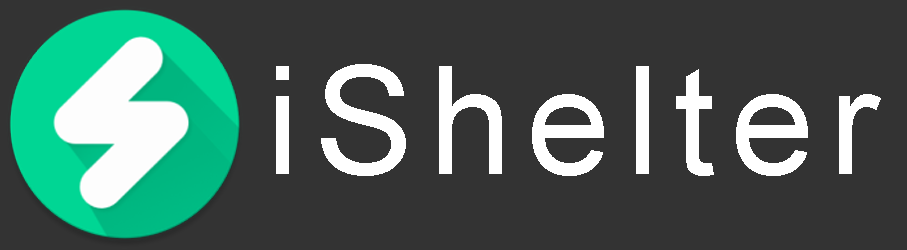
<style>
.page{position:relative;width:907px;height:250px;background:#333333}
.page>*{position:absolute;margin:0}
.t1{font:150.2px "ArialMT";letter-spacing:0.1em;color:#ffffff}
</style>
<div class="page">
<p class="t1" style="left:276px;top:64px;width:605px;height:112px">iShelter</p>
</div>
